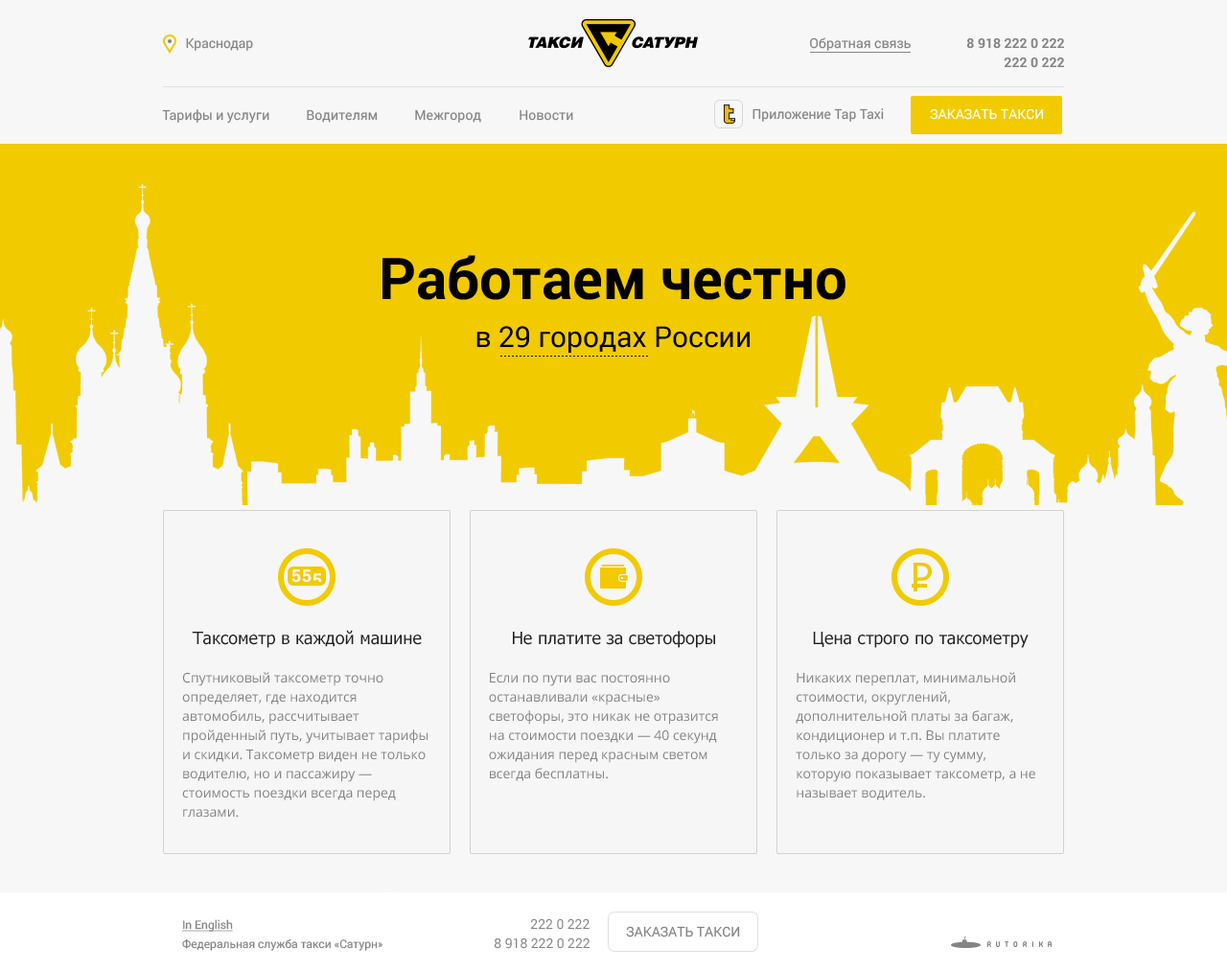
<style>
.page{position:relative;width:1227px;height:971px;background:#f7f7f7}
.page>*{position:absolute;margin:0}
.t1{font:13.4px "Roboto-Regular";color:#848484}
.t2{font:13.4px "Roboto-Bold";color:#848484}
.t3{font:13.4px "Roboto-Regular";color:#ffffff;text-transform:uppercase}
.t4{font:57.5px "Roboto-Bold";color:#000000}
.t5{font:28.8px "Roboto-Regular";color:#000000}
.t6{font:17.3px "Tahoma";color:#222222}
.t7{font:13.4px/19.2px "OpenSans";color:#848484}
.t8{font:11.5px "Roboto-Regular";color:#848484;text-decoration:underline}
.t9{font:13.4px "Roboto-Regular";color:#848484;text-transform:uppercase}
.t10{font:11.5px "Roboto-Regular";color:#848484}
</style>
<div class="page">
<p class="t1" style="left:186px;top:37px;width:67px;height:14px">Краснодар</p>
<p class="t1" style="left:810px;top:37px;width:101px;height:14px">Обратная связь</p>
<p class="t2" style="left:967px;top:38px;width:97px;height:11px">8 918 222 0 222</p>
<p class="t2" style="left:1004px;top:58px;width:60px;height:10px">222 0 222</p>
<p class="t1" style="left:162px;top:109px;width:107px;height:15px">Тарифы и услуги</p>
<p class="t1" style="left:307px;top:109px;width:71px;height:14px">Водителям</p>
<p class="t1" style="left:415px;top:109px;width:66px;height:14px">Межгород</p>
<p class="t1" style="left:520px;top:109px;width:53px;height:12px">Новости</p>
<p class="t1" style="left:753px;top:108px;width:131px;height:14px">Приложение Tap Taxi</p>
<p class="t3" style="left:930px;top:108px;width:114px;height:12px">Заказать такси</p>
<p class="t4" style="left:383px;top:255px;width:463px;height:45px">Работаем честно</p>
<p class="t5" style="left:477px;top:326px;width:273px;height:27px">в 29 городах России</p>
<p class="t6" style="left:192px;top:630px;width:230px;height:18px">Таксометр в каждой машине</p>
<p class="t6" style="left:513px;top:631px;width:202px;height:17px">Не платите за светофоры</p>
<p class="t6" style="left:813px;top:632px;width:216px;height:16px">Цена строго по таксометру</p>
<p class="t7" style="left:182px;top:672px;width:246px;height:146px">Спутниковый таксометр точно определяет, где находится автомобиль, рассчитывает пройденный путь, учитывает тарифы и скидки. Таксометр виден не только водителю, но и пассажиру —  стоимость поездки всегда перед глазами.</p>
<p class="t7" style="left:489px;top:673px;width:229px;height:109px">Если по пути вас постоянно останавливали «красные» светофоры, это никак не отразится <br>на стоимости поездки — 40 секунд ожидания перед красным светом всегда бесплатны.</p>
<p class="t7" style="left:796px;top:672px;width:240px;height:129px">Никаких переплат, минимальной стоимости, округлений, дополнительной платы за багаж, кондиционер и т.п. Вы платите только за дорогу — ту сумму, которую показывает таксометр, а не называет водитель.</p>
<p class="t8" style="left:181px;top:920px;width:52px;height:12px">In English</p>
<p class="t1" style="left:531px;top:920px;width:59px;height:10px">222 0 222</p>
<p class="t9" style="left:626px;top:926px;width:114px;height:12px">Заказать такси</p>
<p class="t10" style="left:182px;top:939px;width:201px;height:12px">Федеральная служба такси «Сатурн»</p>
<p class="t1" style="left:495px;top:939px;width:95px;height:10px">8 918 222 0 222</p>
</div>
